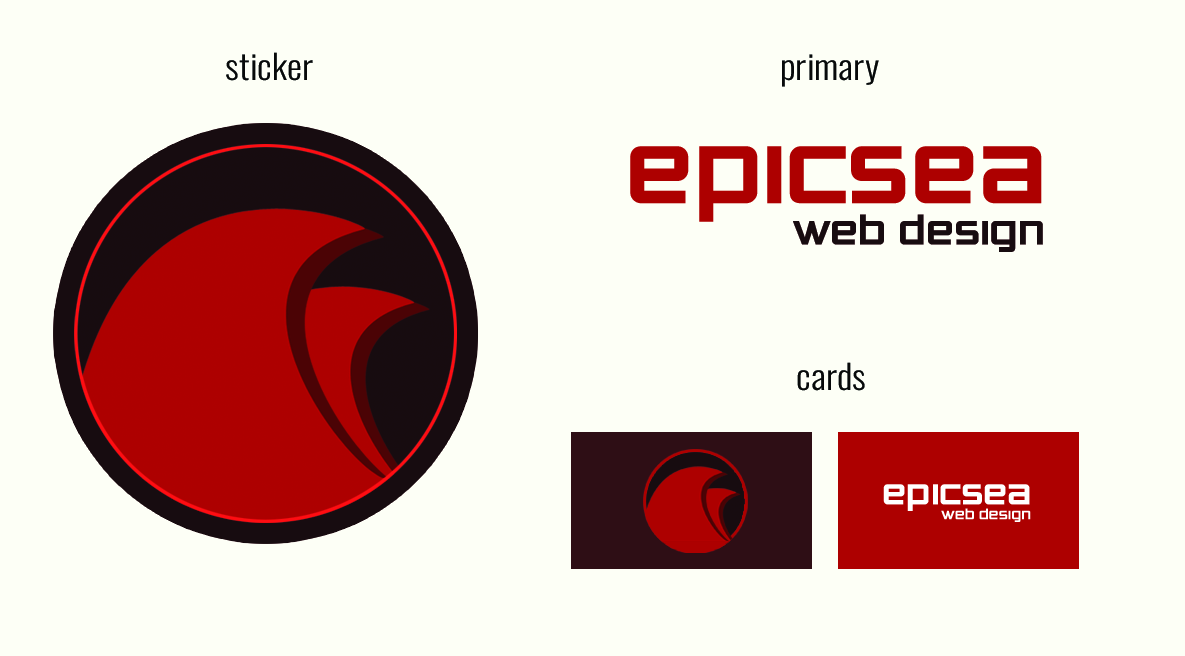
<style>
.page{position:relative;width:1185px;height:656px;background:#fdfff6}
.page>*{position:absolute;margin:0}
.t1{font:33.8px "Oswald-Light";color:#080a0a;scale:1.11 1}
.t2{font:94.9px "ZeroThrees";color:#ad0000;font-weight:bold}
.t3{font:38.9px "ZeroThrees";color:#170c10;font-weight:bold}
.t4{font:33.8px "ZeroThrees";color:#ffffff;font-weight:bold}
.t5{font:13.9px "ZeroThrees";color:#ffffff;font-weight:bold}
</style>
<div class="page">
<p class="t1" style="left:226px;top:52px;width:87px;height:29px">sticker</p>
<p class="t1" style="left:782px;top:54px;width:97px;height:33px">primary</p>
<p class="t2" style="left:630px;top:146px;width:412px;height:76px">epicsea</p>
<p class="t3" style="left:793px;top:214px;width:250px;height:38px">web design</p>
<p class="t1" style="left:797px;top:362px;width:68px;height:29px">cards</p>
<p class="t4" style="left:883px;top:484px;width:147px;height:27px">epicsea</p>
<p class="t5" style="left:941px;top:508px;width:90px;height:14px">web design</p>
</div>
